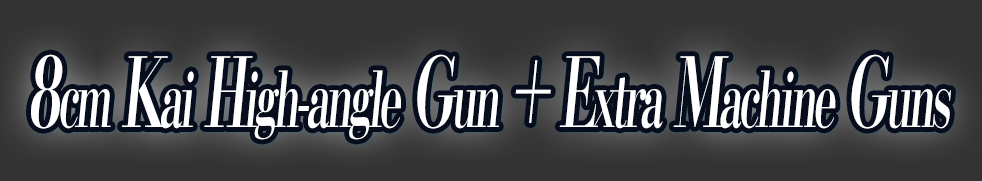
<style>
.page{position:relative;width:982px;height:181px;background:#333333}
.page>*{position:absolute;margin:0}
.t1{font:76.8px "KochoStd-Heavy";letter-spacing:-0.08em;color:#ffffff;font-style:italic;scale:0.55 1}
.t2{font:96px "KochoStd-Heavy";letter-spacing:-0.08em;color:#ffffff;font-style:italic;scale:0.55 1}
</style>
<div class="page">
<p class="t1" style="left:31px;top:54px;width:920px;height:86px"><span class="t2">8</span>cm<span class="t2"> K</span>ai<span class="t2"> H</span>igh-angle<span class="t2"> G</span>un<span class="t2"> + E</span>xtra<span class="t2"> M</span>achine<span class="t2"> G</span>uns</p>
</div>
